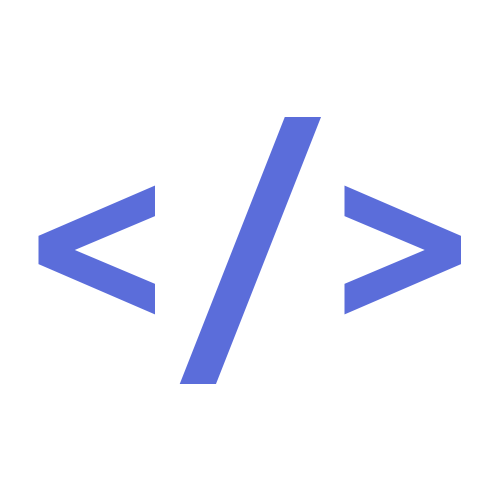
<style>
.page{position:relative;width:500px;height:500px;background:#ffffff}
.page>*{position:absolute;margin:0}
.t1{font:381px "BebasNeue-Regular";color:#5b6dda}
</style>
<div class="page">
<p class="t1" style="left:38px;top:117px;width:423px;height:267px">&lt;/&gt;</p>
</div>
